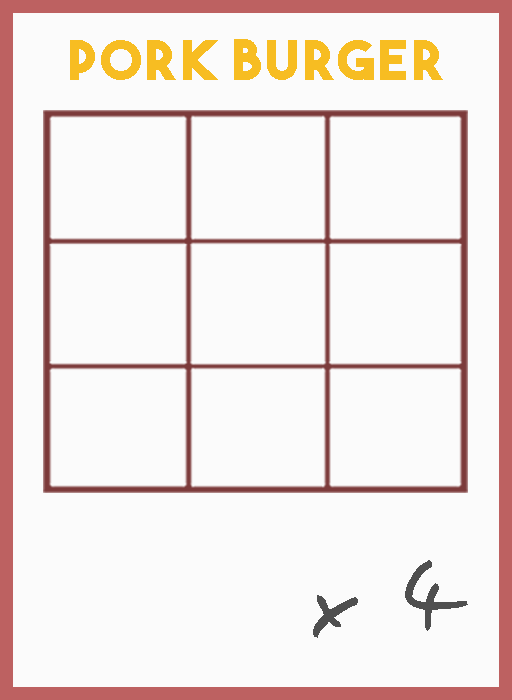
<style>
.page{position:relative;width:512px;height:700px;background:#fbfbfb}
.page>*{position:absolute;margin:0}
.t1{font:54.5px "TheBoldFont";letter-spacing:0.05em;color:#f7bd22}
.t2{font:106.1px "EasySpeech";letter-spacing:0.05em;color:#4f4f4f}
</style>
<div class="page">
<p class="t1" style="left:70px;top:39px;width:373px;height:41px">Pork burger</p>
<p class="t2" style="left:313px;top:560px;width:155px;height:78px">x 4</p>
</div>
